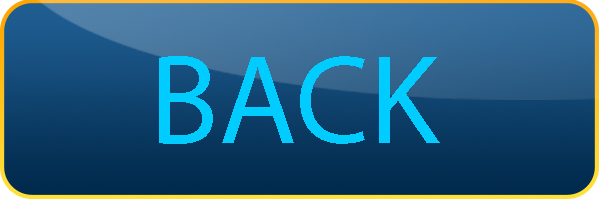
<style>
.page{position:relative;width:600px;height:200px}
.page>*{position:absolute;margin:0}
.t1{font:128px "MyriadPro-Regular";color:#00ccff}
</style>
<div class="page">
<p class="t1" style="left:159px;top:56px;width:281px;height:88px">BACK</p>
</div>
